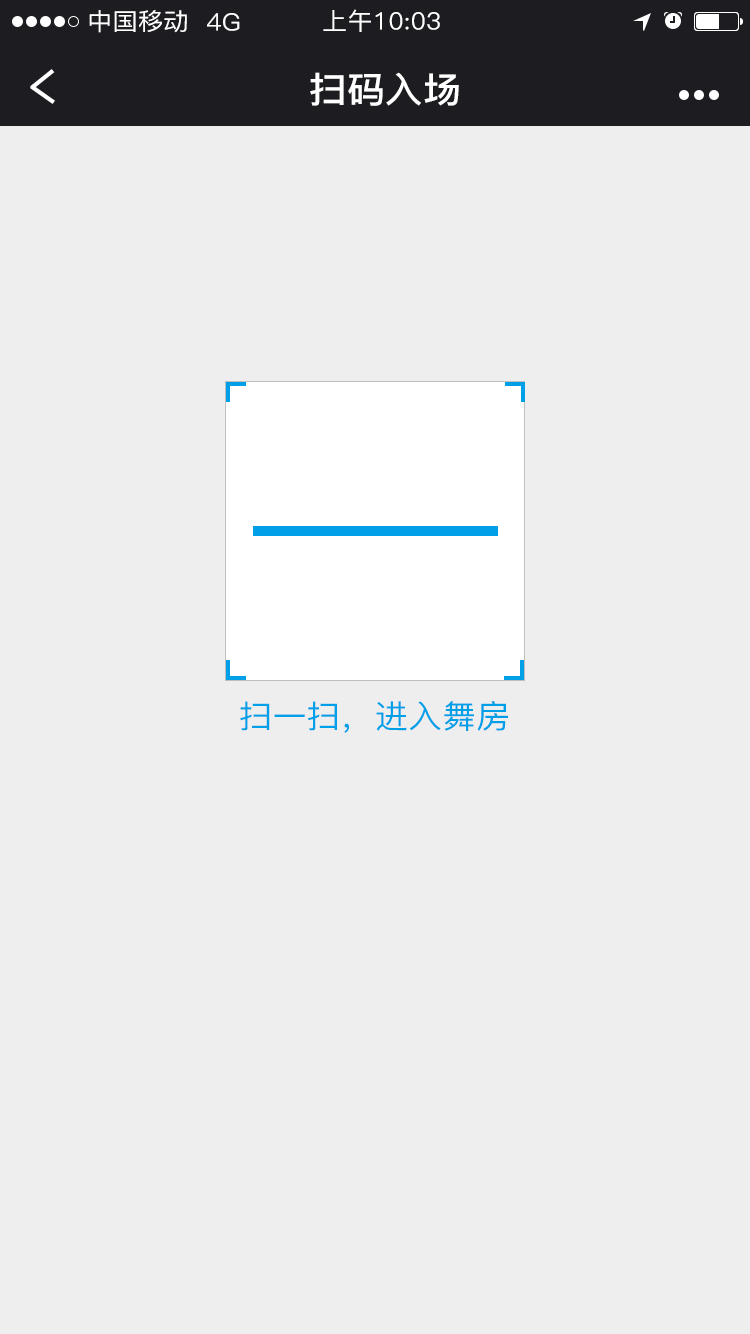
<style>
.page{position:relative;width:750px;height:1334px;background:#eeeeee}
.page>*{position:absolute;margin:0}
.t1{font:24px "PingFang-SC-Medium";letter-spacing:0.01em;color:#ffffff;scale:1.05 1}
.t2{font:36px "PingFang-SC-Bold";letter-spacing:0.01em;color:#ffffff;scale:1.05 1}
.t3{font:32px "PingFang-SC-Medium";letter-spacing:0.01em;color:#00a0e9;scale:1.05 1}
</style>
<div class="page">
<p class="t1" style="left:89px;top:10px;width:98px;height:23px">中国移动</p>
<p class="t1" style="left:207px;top:13px;width:33px;height:18px">4G</p>
<p class="t1" style="left:323px;top:9px;width:117px;height:23px">上午10:03</p>
<p class="t2" style="left:310px;top:72px;width:149px;height:34px">扫码入场</p>
<p class="t3" style="left:240px;top:701px;width:268px;height:32px">扫一扫，进入舞房</p>
</div>
